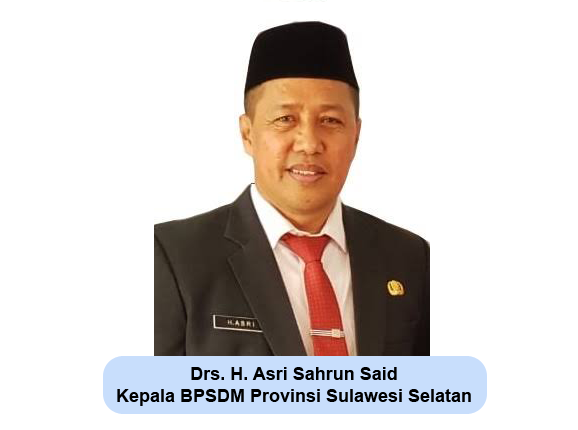
<style>
.page{position:relative;width:578px;height:430px;background:#ffffff}
.page>*{position:absolute;margin:0}
.t1{font:18px "Arial-BoldMT";color:#000000}
</style>
<div class="page">
<p class="t1" style="left:117px;top:367px;width:354px;height:39px;text-align:center">Drs. H. Asri Sahrun Said<br>Kepala BPSDM Provinsi Sulawesi Selatan</p>
</div>
